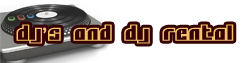
<style>
.page{position:relative;width:250px;height:63px;background:#ffffff}
.page>*{position:absolute;margin:0}
.t1{font:18px "AlphaFlight";letter-spacing:0.05em;color:#f5c26a;font-weight:bold}
.t2{font:18px "AmericanTypewriter";letter-spacing:0.05em;color:#f5c26a;font-weight:bold}
</style>
<div class="page">
<p class="t1" style="left:16px;top:24px;width:218px;height:20px">DJ<span class="t2">’</span>s and DJ Rental</p>
</div>
